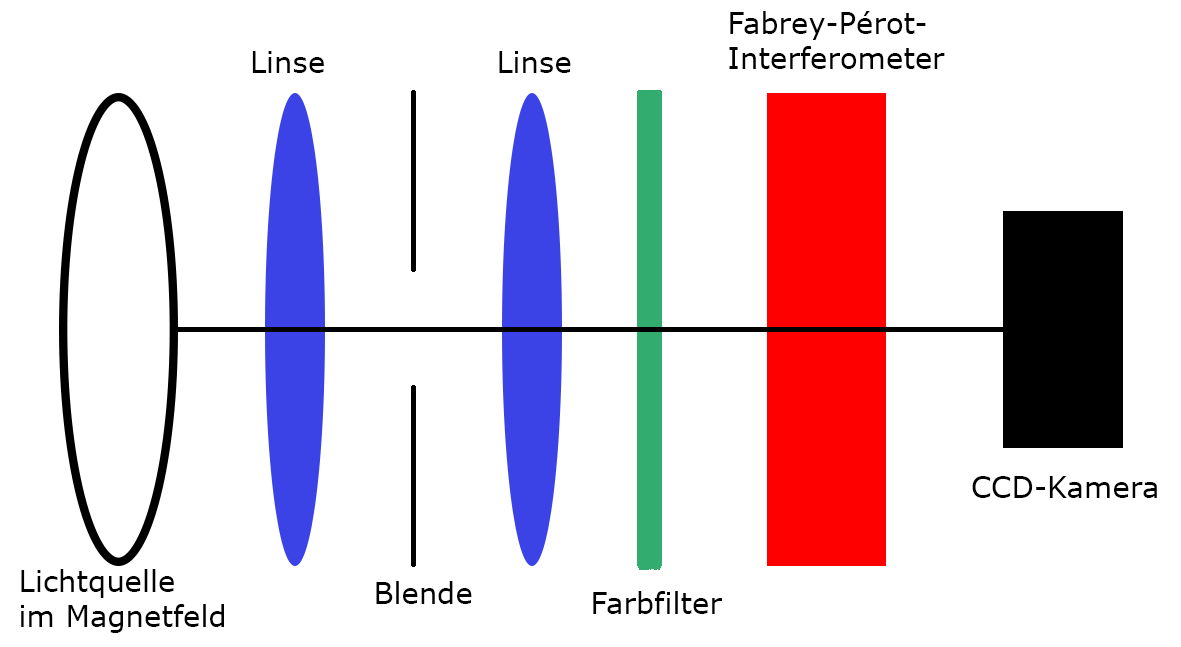
<style>
.page{position:relative;width:1181px;height:647px;background:#ffffff}
.page>*{position:absolute;margin:0}
.t1{font:29.2px "Verdana";color:#000000}
</style>
<div class="page">
<p class="t1" style="left:729px;top:11px;width:216px;height:58px">Fabrey-Pérot-<br>Interferometer</p>
<p class="t1" style="left:252px;top:51px;width:72px;height:22px">Linse</p>
<p class="t1" style="left:499px;top:51px;width:72px;height:22px">Linse</p>
<p class="t1" style="left:972px;top:476px;width:185px;height:22px">CCD-Kamera</p>
<p class="t1" style="left:21px;top:569px;width:203px;height:64px">Lichtquelle<br>im Magnetfeld</p>
<p class="t1" style="left:376px;top:581px;width:96px;height:23px">Blende</p>
<p class="t1" style="left:593px;top:591px;width:129px;height:23px">Farbfilter</p>
</div>
